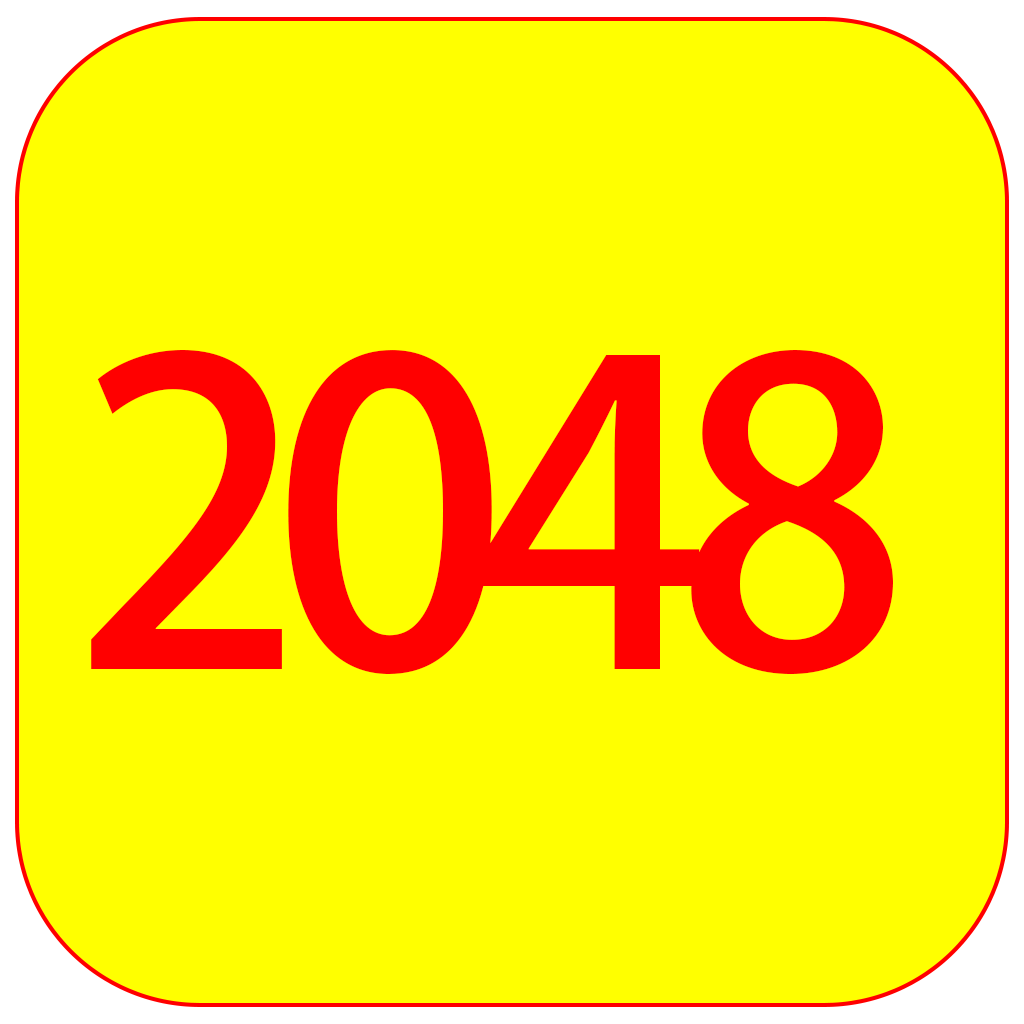
<style>
.page{position:relative;width:1024px;height:1024px;background:#ffff00}
.page>*{position:absolute;margin:0}
.t1{font:416.7px "AdobeHeitiStd-Regular";letter-spacing:-0.08em;color:#ff0000}
</style>
<div class="page">
<p class="t1" style="left:91px;top:350px;width:802px;height:325px">2048</p>
</div>
